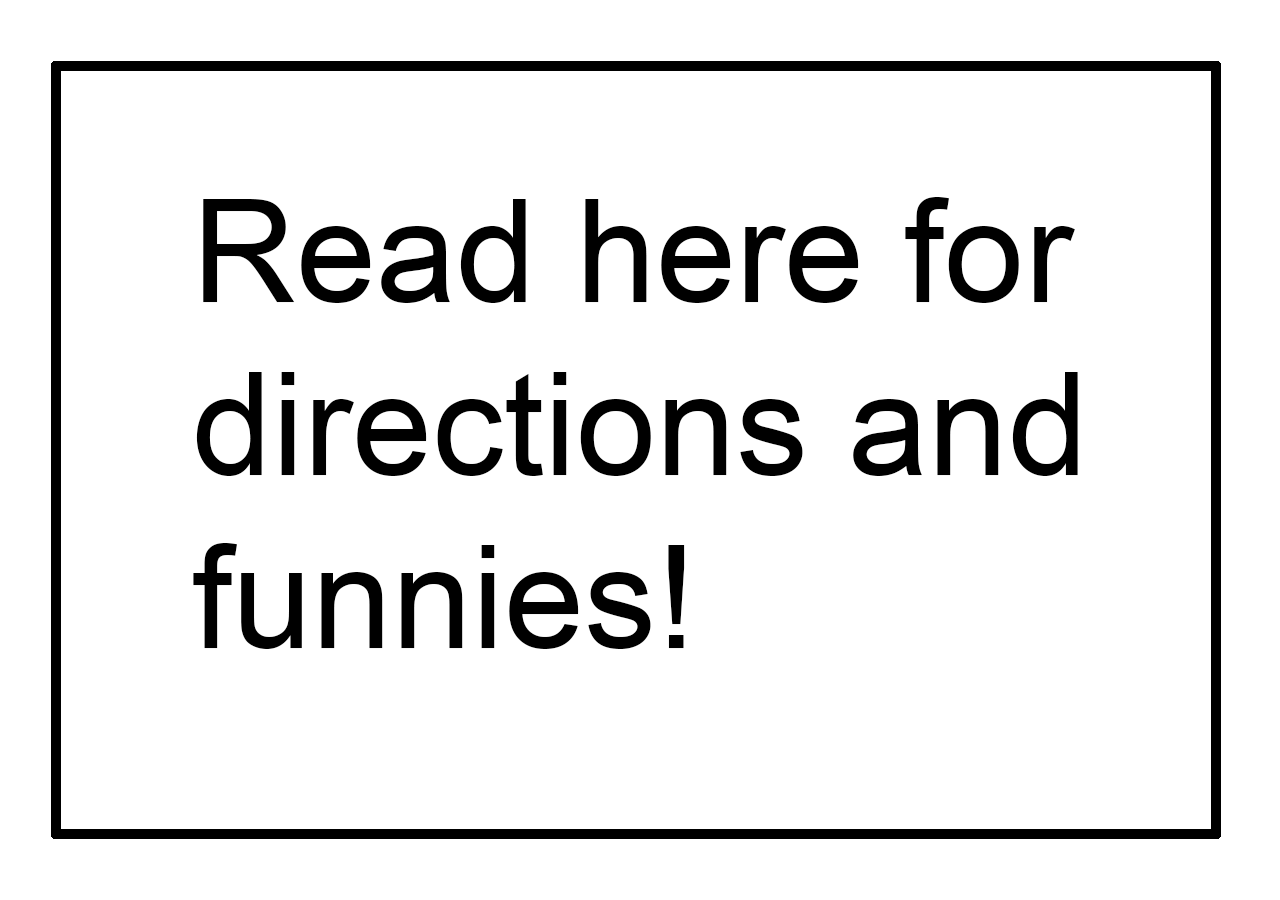
<style>
.page{position:relative;width:1280px;height:900px;background:#ffffff}
.page>*{position:absolute;margin:0}
.t1{font:144px "ArialMT";color:#000000}
</style>
<div class="page">
<p class="t1" style="left:193px;top:197px;width:885px;height:452px">Read here for<br>directions and<br>funnies!</p>
</div>
